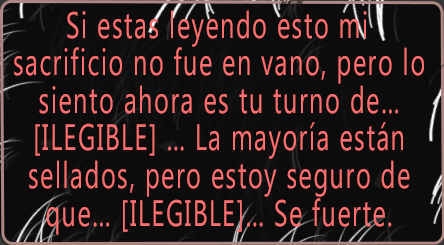
<style>
.page{position:relative;width:444px;height:245px;background:#0c0c0c}
.page>*{position:absolute;margin:0}
.t1{font:36.7px/37.5px "LaoUI";letter-spacing:0.06em;color:#ff6f6f;scale:0.69 1}
</style>
<div class="page">
<p class="t1" style="left:14px;top:10px;width:410px;height:225px;text-align:center">Si estas leyendo esto mi sacrificio no fue en vano, pero lo siento ahora es tu turno de… [ILEGIBLE] … La mayoría están sellados, pero estoy seguro de que… [ILEGIBLE]… Se fuerte.</p>
</div>
